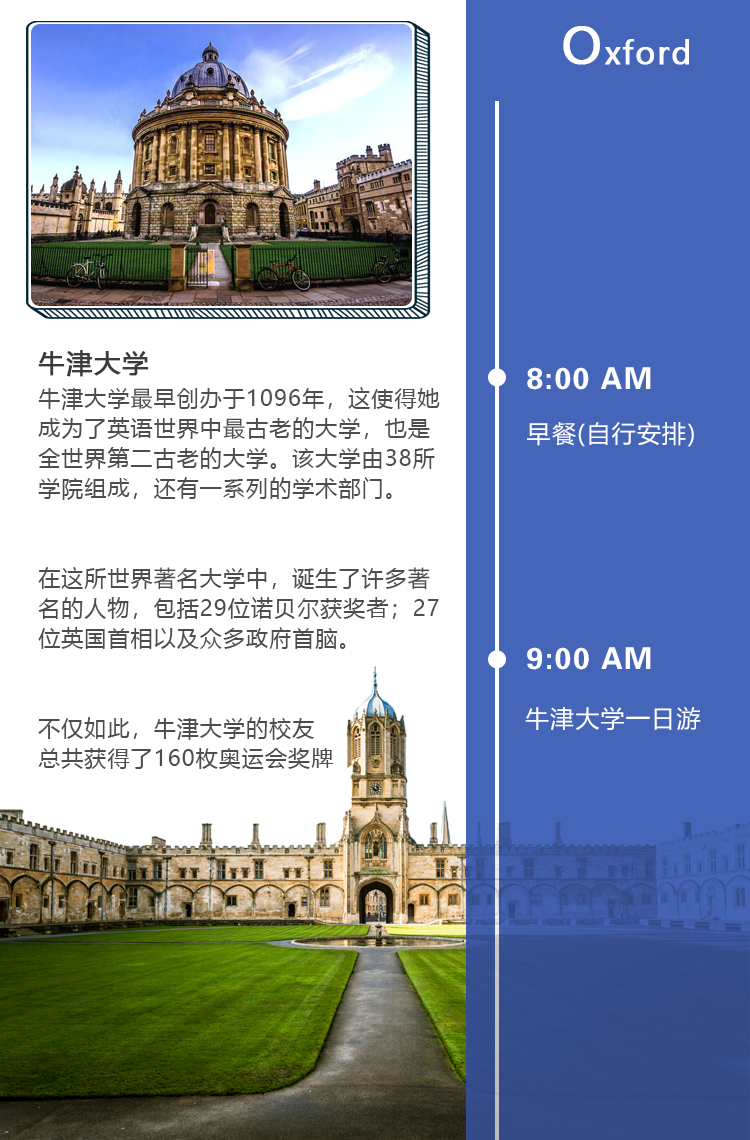
<style>
.page{position:relative;width:750px;height:1140px;background:#ffffff}
.page>*{position:absolute;margin:0}
.t1{font:30.5px "MicrosoftYaHei";letter-spacing:0.05em;color:#ffffff;font-weight:bold}
.t2{font:48.8px "MicrosoftYaHei";letter-spacing:0.05em;color:#ffffff;font-weight:bold}
.t3{font:22px/30px "MicrosoftYaHei";letter-spacing:0.05em;color:#4d4d4d}
.t4{font:26px/37.5px "MicrosoftYaHei";letter-spacing:0.05em;color:#3b3b3b;font-weight:bold}
.t5{font:29.9px "FZZYJW--GB1-0";letter-spacing:0.05em;color:#ffffff}
.t6{font:23.9px "MicrosoftYaHei";letter-spacing:0.05em;color:#ffffff}
.t7{font:24px "MicrosoftYaHei";letter-spacing:0.05em;color:#ffffff}
</style>
<div class="page">
<p class="t1" style="left:563px;top:26px;width:126px;height:39px"><span class="t2">O</span>xford</p>
<p class="t3" style="left:38px;top:350px;width:402px;height:419px"><span class="t4">牛津大学<br></span>牛津大学最早创办于1096年，这使得她<br>成为了英语世界中最古老的大学，也是<br>全世界第二古老的大学。该大学由38所<br>学院组成，还有一系列的学术部门。<br><br><br>在这所世界著名大学中，诞生了许多著<br>名的人物，包括29位诺贝尔获奖者；27<br>位英国首相以及众多政府首脑。<br><br><br>不仅如此，牛津大学的校友<br>总共获得了160枚奥运会奖牌</p>
<p class="t5" style="left:527px;top:367px;width:124px;height:23px">8:00 AM</p>
<p class="t6" style="left:527px;top:421px;width:167px;height:26px">早餐(自行安排)</p>
<p class="t5" style="left:527px;top:647px;width:124px;height:23px">9:00 AM</p>
<p class="t7" style="left:525px;top:707px;width:176px;height:23px">牛津大学一日游</p>
</div>
